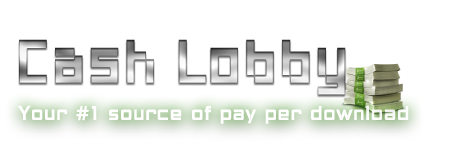
<style>
.page{position:relative;width:450px;height:160px;background:#ffffff}
.page>*{position:absolute;margin:0}
.t1{font:59px "PFOnlineThreePro-Double"}
.t2{font:19px "PFStudioHeavy-Regular";color:#ffffff}
</style>
<div class="page">
<p class="t1" style="left:19px;top:39px;width:327px;height:56px">Cash Lobby</p>
<p class="t2" style="left:18px;top:105px;width:391px;height:19px">Your #1 source of pay per download</p>
</div>
